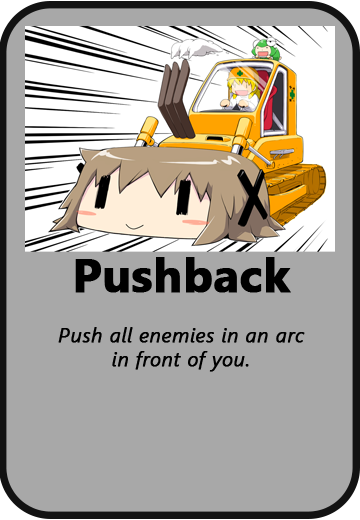
<style>
.page{position:relative;width:360px;height:520px;background:#a8a8a8}
.page>*{position:absolute;margin:0}
.t1{font:47px "SegoeUI-Bold";color:#000000;font-weight:bold}
.t2{font:20px "SegoeUI-SemilightItalic";color:#000000;font-weight:bold}
</style>
<div class="page">
<p class="t1" style="left:75px;top:257px;width:216px;height:36px">Pushback</p>
<p class="t2" style="left:58px;top:327px;width:247px;height:45px;text-align:center">Push all enemies in an arc<br>in front of you.</p>
</div>
